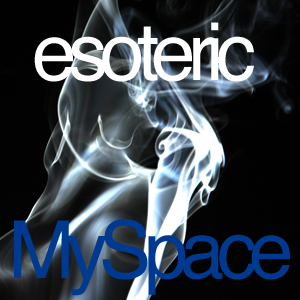
<style>
.page{position:relative;width:300px;height:300px}
.page>*{position:absolute;margin:0}
.t1{font:80px "Helvetica";letter-spacing:-0.1em;color:#ffffff}
.t2{font:80px "Helvetica";letter-spacing:-0.1em;color:#003a90}
</style>
<div class="page">
<p class="t1" style="left:34px;top:22px;width:220px;height:60px">esoteric</p>
<p class="t2" style="left:14px;top:219px;width:276px;height:77px">MySpace</p>
</div>
